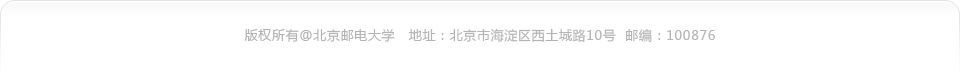
<style>
.page{position:relative;width:960px;height:72px;background:#ffffff}
.page>*{position:absolute;margin:0}
.t1{font:13px "MicrosoftYaHei";letter-spacing:0.05em;color:#b4b4b4}
</style>
<div class="page">
<p class="t1" style="left:244px;top:28px;width:471px;height:14px">版权所有@北京邮电大学   地址：北京市海淀区西土城路10号  邮编：100876</p>
</div>
